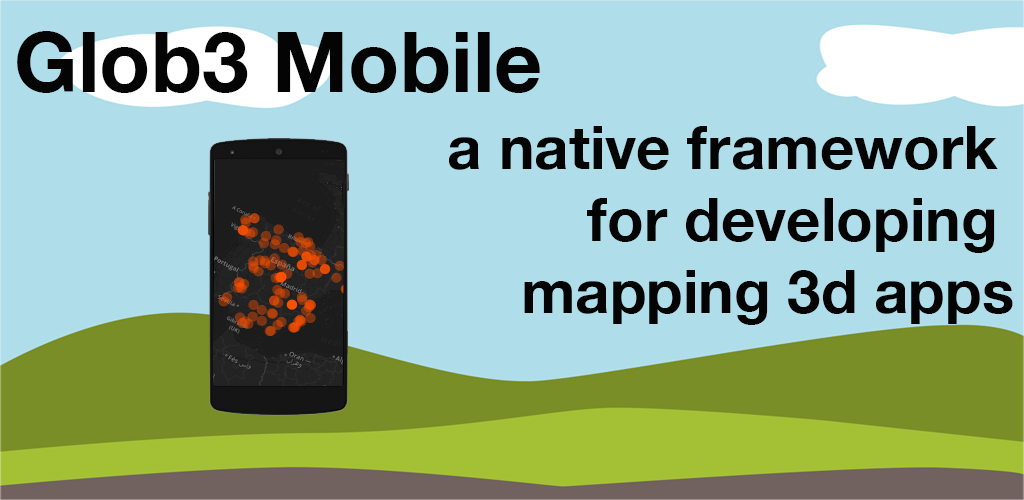
<style>
.page{position:relative;width:1024px;height:500px;background:#afdde9}
.page>*{position:absolute;margin:0}
.t1{font:84px "HelveticaNeue-Bold";color:#040404}
.t2{font:60px "HelveticaNeue-Bold";color:#040404}
</style>
<div class="page">
<p class="t1" style="left:17px;top:31px;width:523px;height:62px">Glob3 Mobile</p>
<p class="t2" style="left:449px;top:126px;width:564px;height:199px;text-align:right">a native framework <br>for developing <br>mapping 3d apps</p>
</div>
